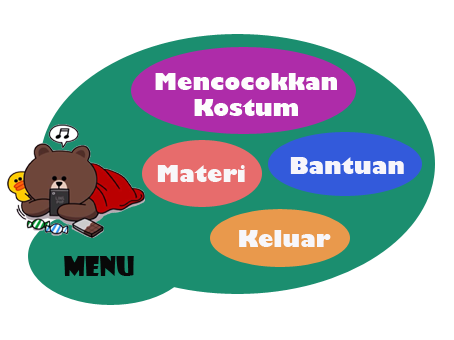
<style>
.page{position:relative;width:454px;height:340px;background:#ffffff}
.page>*{position:absolute;margin:0}
.t1{font:22px "GillSans-UltraBold";color:#fdfdfd}
.t2{font:22px "GillSans-UltraBold";color:#f7f5fb}
.t3{font:22px "GillSans-UltraBold";color:#f8f7f9}
.t4{font:22px "GillSans-UltraBold";color:#f7f6fa}
.t5{font:26px "ShowcardGothic-Reg";color:#080808}
</style>
<div class="page">
<p class="t1" style="left:155px;top:73px;width:182px;height:43px;text-align:center">Mencocokkan<br>Kostum</p>
<p class="t2" style="left:290px;top:157px;width:114px;height:17px">Bantuan</p>
<p class="t3" style="left:157px;top:165px;width:88px;height:17px">Materi</p>
<p class="t4" style="left:239px;top:230px;width:92px;height:17px">Keluar</p>
<p class="t5" style="left:64px;top:256px;width:70px;height:20px">Menu</p>
</div>
